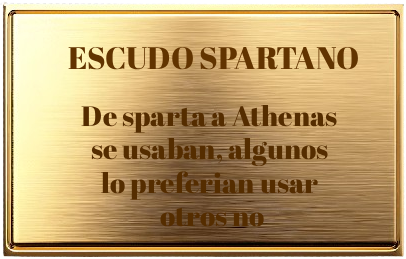
<style>
.page{position:relative;width:406px;height:259px}
.page>*{position:absolute;margin:0}
.t1{font:31px "AbrilFatface-Regular";color:#623400}
.t2{font:28px "AbrilFatface-Regular";color:#552d00}
.t3{font:24px "AbrilFatface-Regular";color:#8e8e8e}
</style>
<div class="page">
<p class="t1" style="left:68px;top:46px;width:290px;height:24px">ESCUDO SPARTANO</p>
<p class="t2" style="left:81px;top:105px;width:256px;height:122px"><span class="t3"><br></span>De sparta a Athenas <br>se usaban, algunos <br>lo preferian usar <br>otros no</p>
</div>
